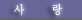
<style>
.page{position:relative;width:82px;height:20px;background:#666699}
.page>*{position:absolute;margin:0}
.t1{font:12px "BatangChe";color:#ffffff;scale:0.9 1}
</style>
<div class="page">
<p class="t1" style="left:14px;top:4px;width:49px;height:12px">사     랑</p>
</div>
